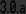
<style>
.page{position:relative;width:26px;height:14px;background:#333333}
.page>*{position:absolute;margin:0}
.t1{font:17.7px "PixelTandysoft";letter-spacing:0.04em;color:#000000;scale:0.63 1}
.t2{font:17.7px "Avenir-Roman";letter-spacing:0.04em;color:#000000;scale:0.63 1}
</style>
<div class="page">
<p class="t1" style="left:0px;top:0px;width:25px;height:14px">3.0.<span class="t2">a</span></p>
</div>
